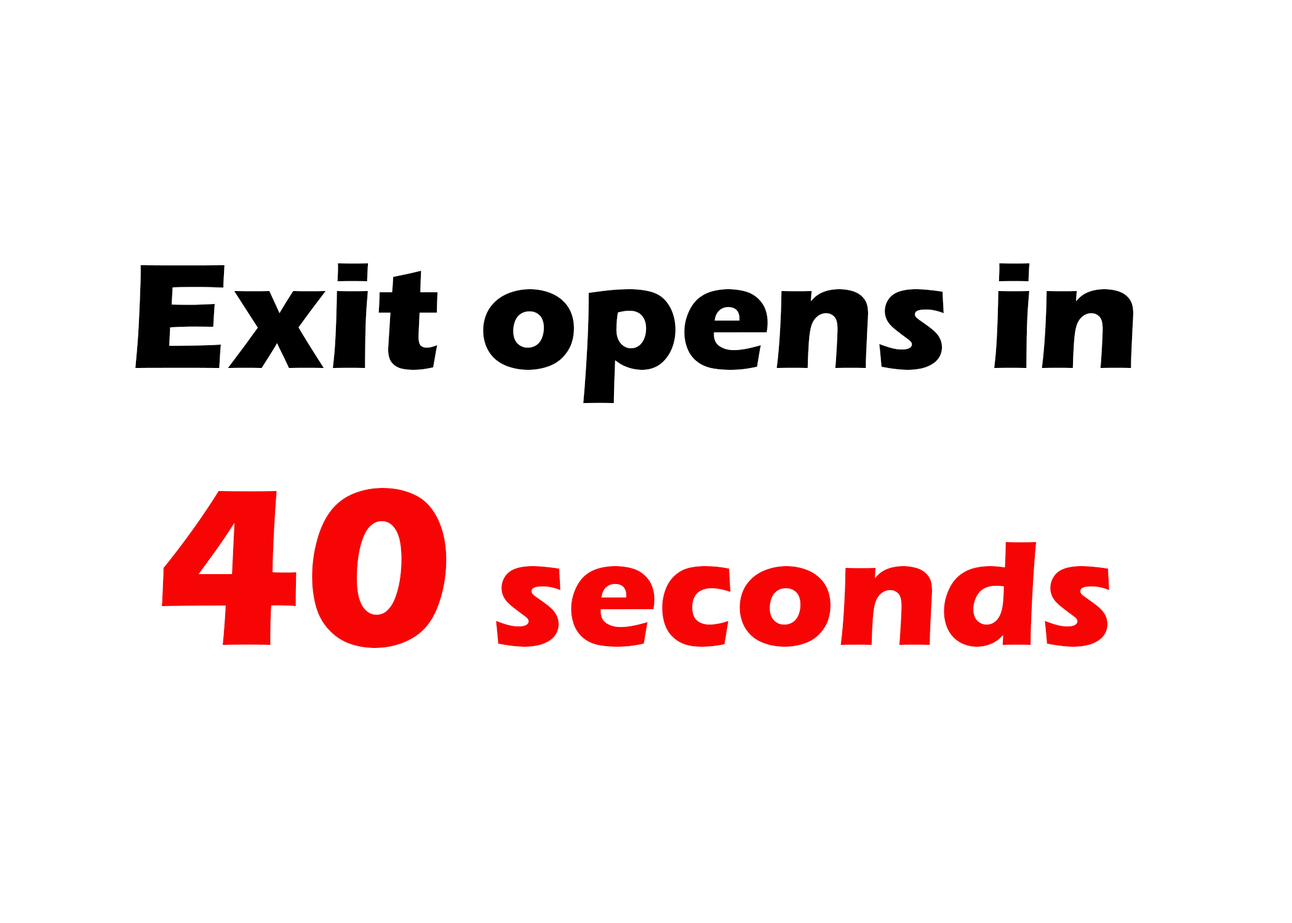
<style>
.page{position:relative;width:1292px;height:923px;background:#ffffff}
.page>*{position:absolute;margin:0}
.t1{font:153.8px "ErasITC-Bold";color:#000000}
.t2{font:230.7px "ErasITC-Bold";color:#f70505}
.t3{font:153.8px "ErasITC-Bold";color:#f70505}
</style>
<div class="page">
<p class="t1" style="left:135px;top:263px;width:998px;height:385px;text-align:center">Exit opens in<br><span class="t2">40</span><span class="t3"> seconds</span></p>
</div>
